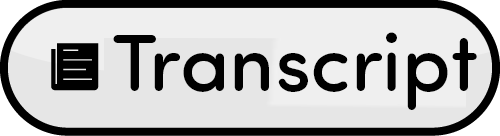
<style>
.page{position:relative;width:500px;height:136px;background:#efefef}
.page>*{position:absolute;margin:0}
.t1{font:81.2px "SofiaProSoftMedium";color:#000000}
</style>
<div class="page">
<p class="t1" style="left:113px;top:32px;width:364px;height:78px">Transcript</p>
</div>
